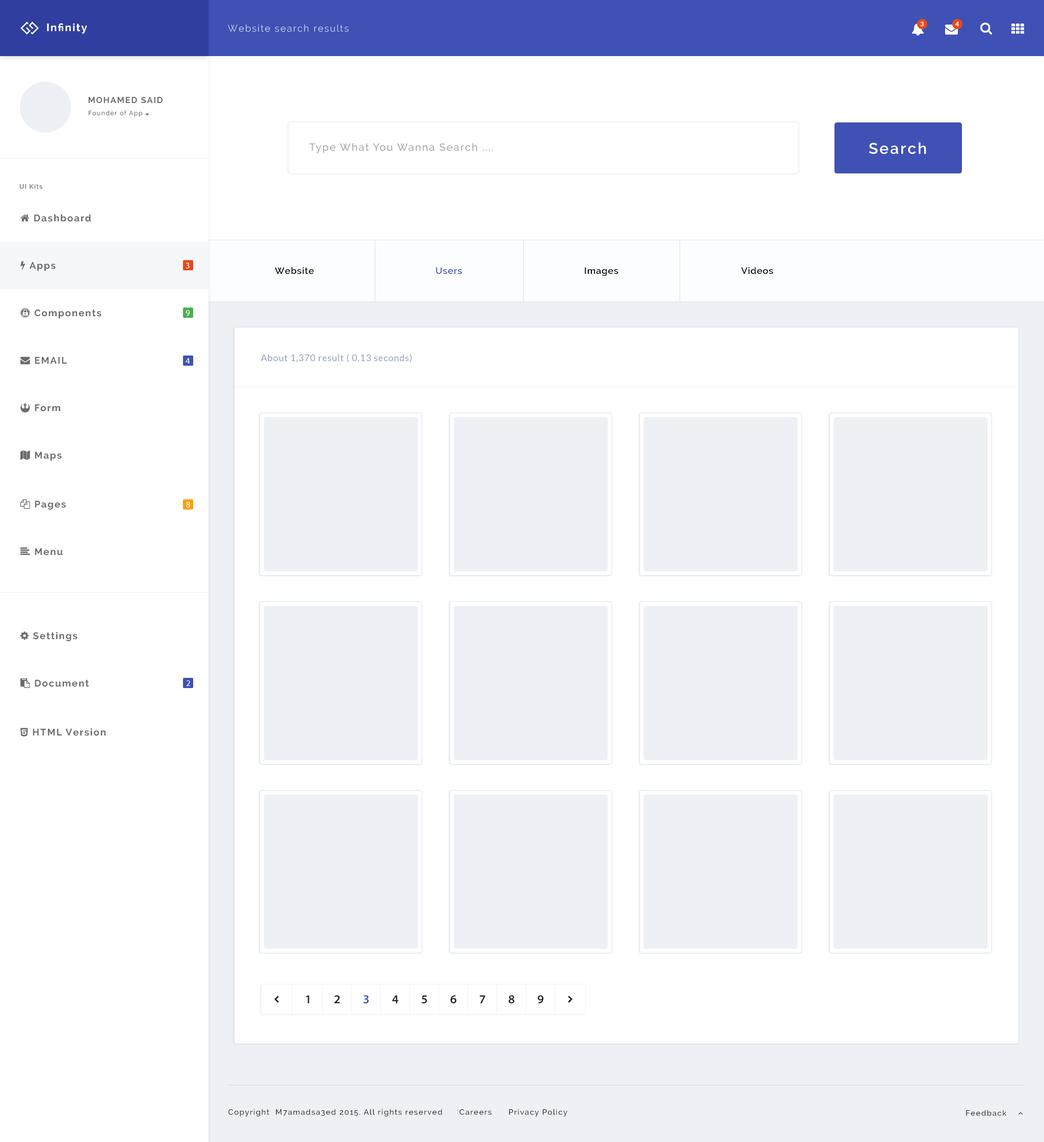
<style>
.page{position:relative;width:1044px;height:1142px;background:#ffffff}
.page>*{position:absolute;margin:0}
.t1{font:10.6px "Raleway-Bold";letter-spacing:0.1em;color:#ffffff}
.t2{font:9.6px "Raleway";letter-spacing:0.1em;color:#c5cae9}
.t3{font:6.4px "Lato-Bold";letter-spacing:0.1em;color:#ffffff}
.t4{font:8.5px "Raleway-Bold";letter-spacing:0.1em;color:#6a6c6f}
.t5{font:10.2px "Raleway-Medium";letter-spacing:0.1em;color:#a3a3a3}
.t6{font:15.3px "Raleway-SemiBold";letter-spacing:0.1em;color:#ffffff}
.t7{font:6.4px "Raleway-SemiBold";letter-spacing:0.1em;color:#6a6c6f}
.t8{font:8.5px "MyriadPro-Regular";letter-spacing:0.1em;color:#ffffff}
.t9{font:9.2px "Raleway-SemiBold";letter-spacing:0.05em;color:#000000}
.t10{font:9.2px "Raleway-SemiBold";letter-spacing:0.05em;color:#3f51b5}
.t11{font:9.2px "Lato-Regular";letter-spacing:0.05em;color:#93a0b5}
.t12{font:12.2px "MyriadPro-Semibold";letter-spacing:0.1em;color:#242424}
.t13{font:12.2px "MyriadPro-Semibold";letter-spacing:0.1em;color:#3f51b5}
.t14{font:7.6px "Raleway-Medium";letter-spacing:0.1em;color:#282828}
</style>
<div class="page">
<p class="t1" style="left:47px;top:23px;width:40px;height:11px">Infinity</p>
<p class="t2" style="left:227px;top:24px;width:122px;height:8px">Website search results</p>
<p class="t3" style="left:920px;top:21px;width:4px;height:6px">3</p>
<p class="t3" style="left:956px;top:21px;width:3px;height:6px">4</p>
<p class="t4" style="left:88px;top:97px;width:75px;height:7px">MOHAMED SAID</p>
<p class="t5" style="left:309px;top:143px;width:184px;height:10px">Type What You Wanna Search ....</p>
<p class="t6" style="left:869px;top:142px;width:58px;height:12px">Search</p>
<p class="t7" style="left:19px;top:184px;width:23px;height:5px">UI Kits</p>
<p class="t8" style="left:186px;top:263px;width:4px;height:6px">3</p>
<p class="t9" style="left:275px;top:267px;width:39px;height:7px">Website</p>
<p class="t10" style="left:436px;top:267px;width:26px;height:7px">Users</p>
<p class="t9" style="left:585px;top:267px;width:34px;height:9px">Images</p>
<p class="t9" style="left:741px;top:267px;width:33px;height:7px">Videos</p>
<p class="t8" style="left:186px;top:310px;width:4px;height:6px">9</p>
<p class="t11" style="left:261px;top:354px;width:151px;height:9px">About 1,370 result ( 0.13 seconds)</p>
<p class="t8" style="left:186px;top:358px;width:4px;height:6px">4</p>
<p class="t8" style="left:186px;top:502px;width:4px;height:6px">8</p>
<p class="t8" style="left:186px;top:680px;width:4px;height:6px">2</p>
<p class="t12" style="left:306px;top:995px;width:4px;height:8px">1</p>
<p class="t12" style="left:335px;top:995px;width:5px;height:8px">2</p>
<p class="t13" style="left:364px;top:995px;width:5px;height:9px">3</p>
<p class="t12" style="left:392px;top:995px;width:7px;height:8px">4</p>
<p class="t12" style="left:422px;top:995px;width:5px;height:9px">5</p>
<p class="t12" style="left:450px;top:995px;width:7px;height:9px">6</p>
<p class="t12" style="left:480px;top:995px;width:5px;height:8px">7</p>
<p class="t12" style="left:508px;top:995px;width:7px;height:9px">8</p>
<p class="t12" style="left:537px;top:995px;width:7px;height:9px">9</p>
<p class="t14" style="left:228px;top:1109px;width:340px;height:7px">Copyright  M7amadsa3ed 2015. All rights reserved      Careers      Privacy Policy</p>
</div>
